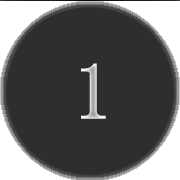
<style>
.page{position:relative;width:180px;height:180px;background:#2e2e2e}
.page>*{position:absolute;margin:0}
.t1{font:80px "YouYuan";font-weight:bold}
</style>
<div class="page">
<p class="t1" style="left:81px;top:62px;width:25px;height:56px">1</p>
</div>
